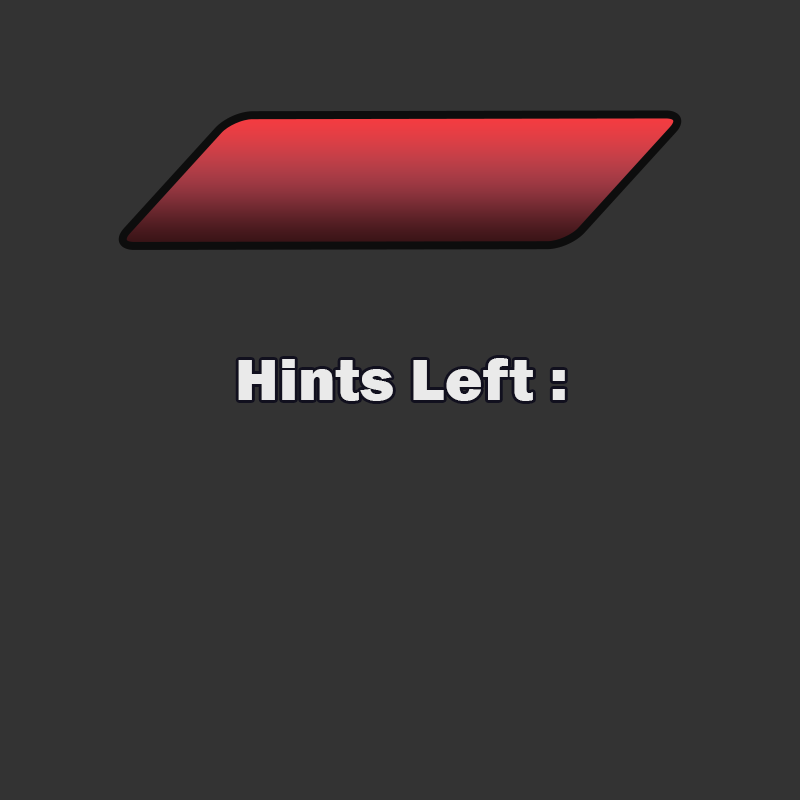
<style>
.page{position:relative;width:800px;height:800px;background:#333333}
.page>*{position:absolute;margin:0}
.t1{font:59.9px "FranklinGothic-Heavy";color:#eaeaea;scale:1.08 1}
</style>
<div class="page">
<p class="t1" style="left:238px;top:358px;width:327px;height:43px">Hints Left :</p>
</div>
